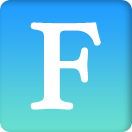
<style>
.page{position:relative;width:132px;height:132px}
.page>*{position:absolute;margin:0}
.t1{font:120px "HoeflerText-Regular";color:#ffffff;font-weight:bold}
</style>
<div class="page">
<p class="t1" style="left:30px;top:22px;width:71px;height:88px">F</p>
</div>
